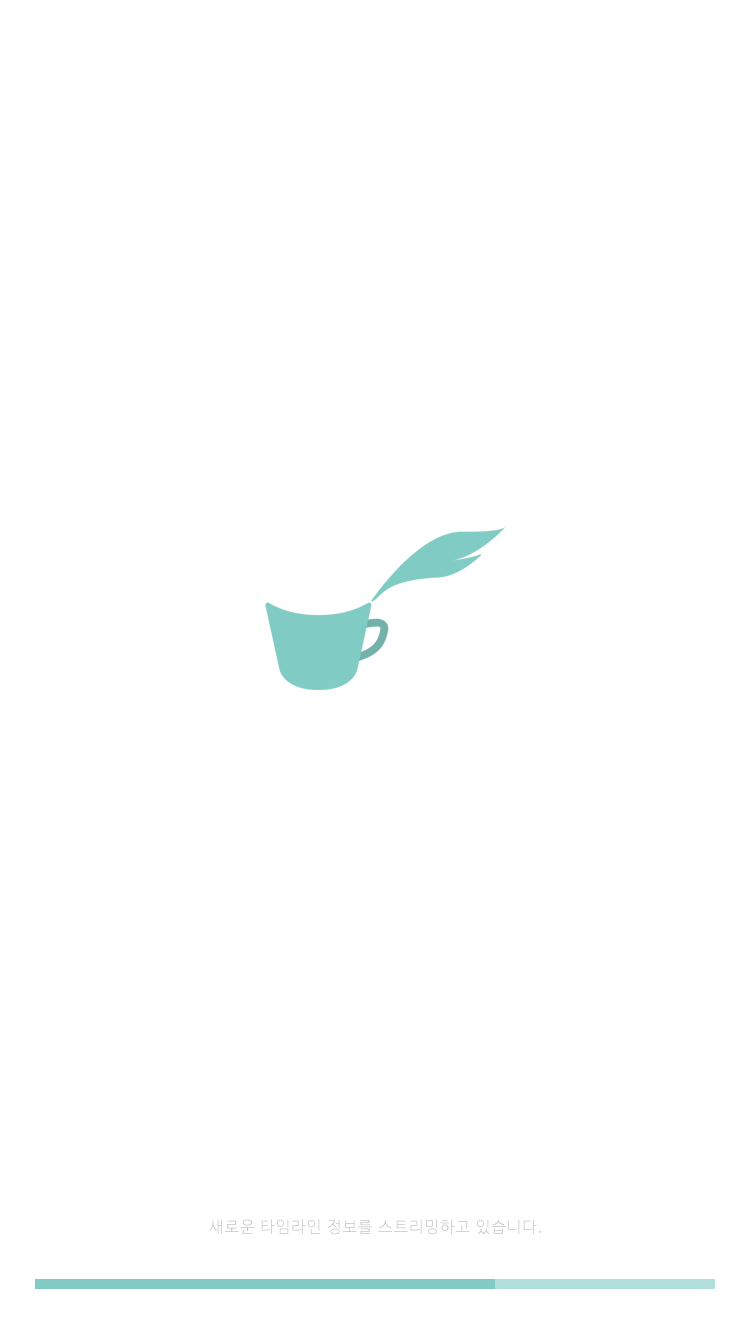
<style>
.page{position:relative;width:750px;height:1336px;background:#ffffff}
.page>*{position:absolute;margin:0}
.t1{font:16px "NanumBarunGothicLight";letter-spacing:0.075em;color:#c1c1c1}
</style>
<div class="page">
<p class="t1" style="left:209px;top:1219px;width:332px;height:16px">새로운 타임라인 정보를 스트리밍하고 있습니다.</p>
</div>
